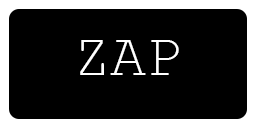
<style>
.page{position:relative;width:256px;height:128px;background:#000000}
.page>*{position:absolute;margin:0}
.t1{font:60px "CourierNewPSMT";color:#ffffff}
</style>
<div class="page">
<p class="t1" style="left:80px;top:40px;width:99px;height:35px">ZAP</p>
</div>
